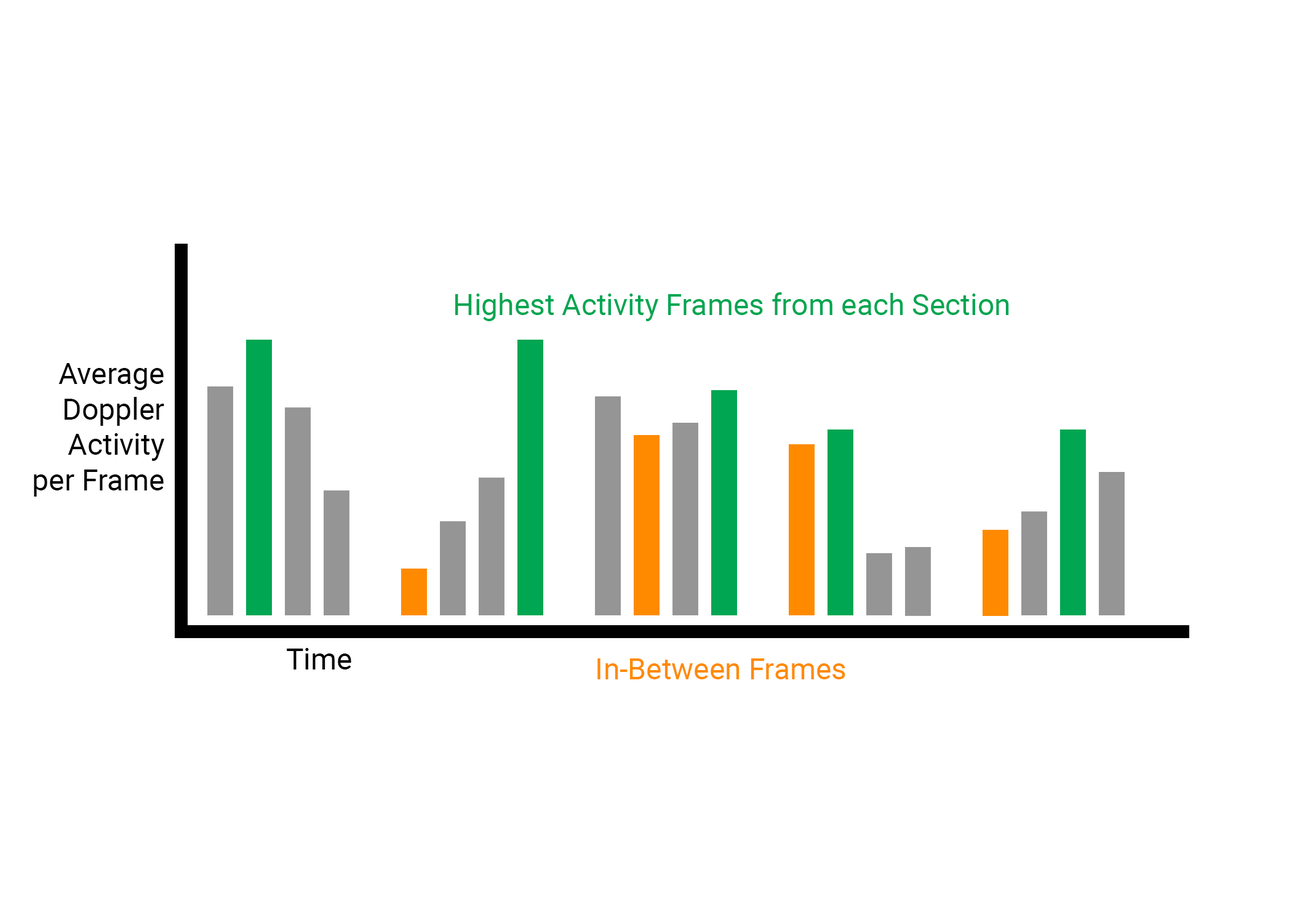
<style>
.page{position:relative;width:1292px;height:923px;background:#ffffff}
.page>*{position:absolute;margin:0}
.t1{font:29.5px "Roboto-Regular";color:#00a651}
.t2{font:29.5px "Roboto-Regular";color:#000000}
.t3{font:29.5px "Roboto-Regular";color:#ff8a00}
</style>
<div class="page">
<p class="t1" style="left:455px;top:292px;width:554px;height:29px">Highest Activity Frames from each Section</p>
<p class="t2" style="left:34px;top:363px;width:131px;height:134px;text-align:right">Average<br>Doppler<br>Activity<br>per Frame</p>
<p class="t2" style="left:287px;top:648px;width:64px;height:21px">Time</p>
<p class="t3" style="left:597px;top:658px;width:248px;height:21px">In-Between Frames</p>
</div>
